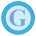
<style>
.page{position:relative;width:36px;height:36px;background:#ffffff}
.page>*{position:absolute;margin:0}
.t1{font:24.3px "TimesNewRomanPS-BoldMT";color:#7ca4df}
</style>
<div class="page">
<p class="t1" style="left:9px;top:9px;width:18px;height:18px">G</p>
</div>
